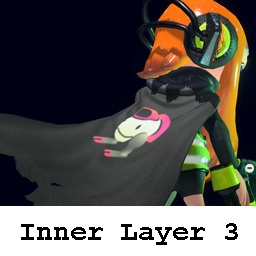
<style>
.page{position:relative;width:256px;height:256px;background:#000014}
.page>*{position:absolute;margin:0}
.t1{font:28px "CourierNewPS-BoldMT";color:#000000}
</style>
<div class="page">
<p class="t1" style="left:21px;top:223px;width:217px;height:22px">Inner Layer 3</p>
</div>
